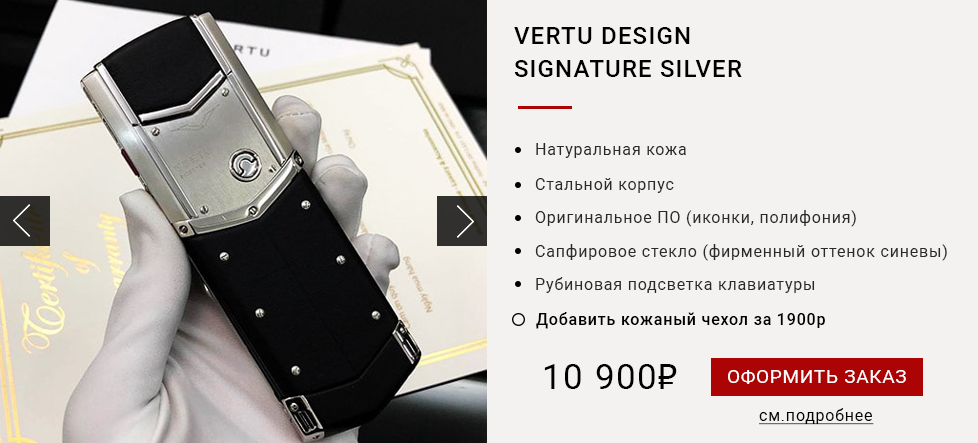
<style>
.page{position:relative;width:978px;height:443px;background:#f4f1f1}
.page>*{position:absolute;margin:0}
.t1{font:24px/33.3px "Roboto-Medium";letter-spacing:0.05em;color:#000000}
.t2{font:16px "Roboto-Regular";letter-spacing:0.05em;color:#2a2929}
.t3{font:16px/33.3px "Roboto-Regular";letter-spacing:0.05em;color:#2a2929}
.t4{font:16px "Roboto-Medium";letter-spacing:0.05em;color:#000000}
.t5{font:34.7px "Roboto-Regular";letter-spacing:0.05em;color:#000000}
.t6{font:34.7px "Tahoma";letter-spacing:0.05em;color:#000000}
.t7{font:18.7px "Roboto-Regular";letter-spacing:0.05em;color:#ffffff}
.t8{font:16px "Roboto-Regular";letter-spacing:0.05em;color:#000000;text-decoration:underline}
</style>
<div class="page">
<p class="t1" style="left:514px;top:27px;width:228px;height:50px">VERTU DESIGN <br>SIGNATURE SILVER</p>
<p class="t2" style="left:536px;top:143px;width:150px;height:15px">Натуральная кожа</p>
<p class="t3" style="left:535px;top:178px;width:412px;height:115px">Стальной корпус<br>Оригинальное ПО (иконки, полифония)<br>Сапфировое стекло (фирменный оттенок синевы)<br>Рубиновая подсветка клавиатуры</p>
<p class="t4" style="left:536px;top:312px;width:289px;height:17px">Добавить кожаный чехол за 1900р</p>
<p class="t5" style="left:544px;top:364px;width:133px;height:25px">10 900<span class="t6">₽</span></p>
<p class="t7" style="left:728px;top:370px;width:178px;height:14px">ОФОРМИТЬ ЗАКАЗ</p>
<p class="t8" style="left:759px;top:408px;width:115px;height:17px">см.подробнее</p>
</div>
